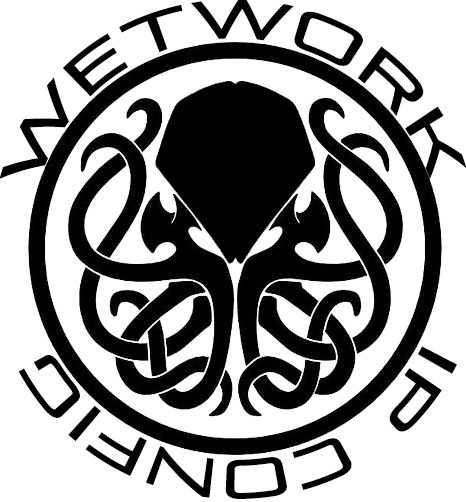
<style>
.page{position:relative;width:466px;height:502px;background:#ffffff}
.page>*{position:absolute;margin:0}
.t1{font:56px/12px "PirulenRg-Regular";letter-spacing:0.1em;color:#000000;text-transform:uppercase;scale:0.83 1}
.t2{font:56px "PirulenRg-Regular";letter-spacing:0.1em;color:#000000;text-transform:uppercase;scale:0.83 1}
</style>
<div class="page">
<p class="t1" style="left:0px;top:0px;width:467px;height:180px">WETWORK</p>
<p class="t2" style="left:18px;top:346px;width:439px;height:153px;rotate:-180deg">IP CONFIG</p>
</div>
